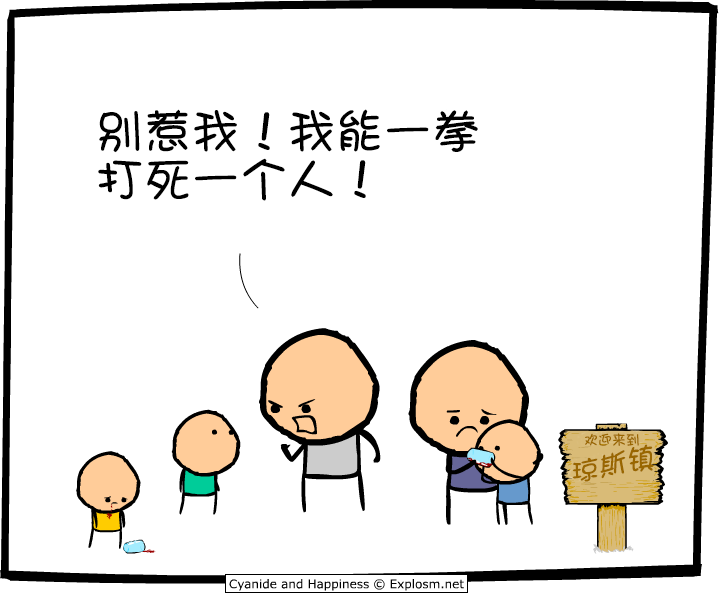
<style>
.page{position:relative;width:720px;height:595px;background:#ffffff}
.page>*{position:absolute;margin:0}
.t1{font:48px/48px "DFPShaoNvW5";color:#000000}
.t2{font:14px "DFPShaoNvW5";color:#996600}
.t3{font:28px "DFPShaoNvW5";color:#996600}
</style>
<div class="page">
<p class="t1" style="left:98px;top:109px;width:380px;height:92px">别惹我！我能一拳<br>打死一个人！</p>
<p class="t2" style="left:585px;top:433px;width:54px;height:13px">欢迎来到</p>
<p class="t3" style="left:572px;top:444px;width:82px;height:38px">琼斯镇</p>
</div>
